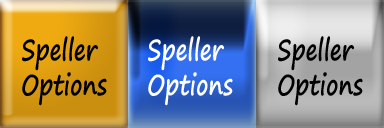
<style>
.page{position:relative;width:384px;height:128px}
.page>*{position:absolute;margin:0}
.t1{font:28.8px "SegoePrint-Bold";color:#000000;scale:0.77 1}
.t2{font:28.8px "SegoePrint-Bold";color:#ffffff;scale:0.77 1}
</style>
<div class="page">
<p class="t1" style="left:22px;top:36px;width:85px;height:70px">Speller<br>Options</p>
<p class="t2" style="left:148px;top:36px;width:85px;height:70px">Speller<br>Options</p>
<p class="t1" style="left:278px;top:36px;width:85px;height:70px">Speller<br>Options</p>
</div>
